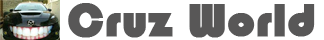
<style>
.page{position:relative;width:324px;height:40px;background:#ffffff}
.page>*{position:absolute;margin:0}
.t1{font:48px "Bauhaus93";color:#585757;font-weight:bold}
</style>
<div class="page">
<p class="t1" style="left:68px;top:3px;width:247px;height:35px">Cruz World</p>
</div>
